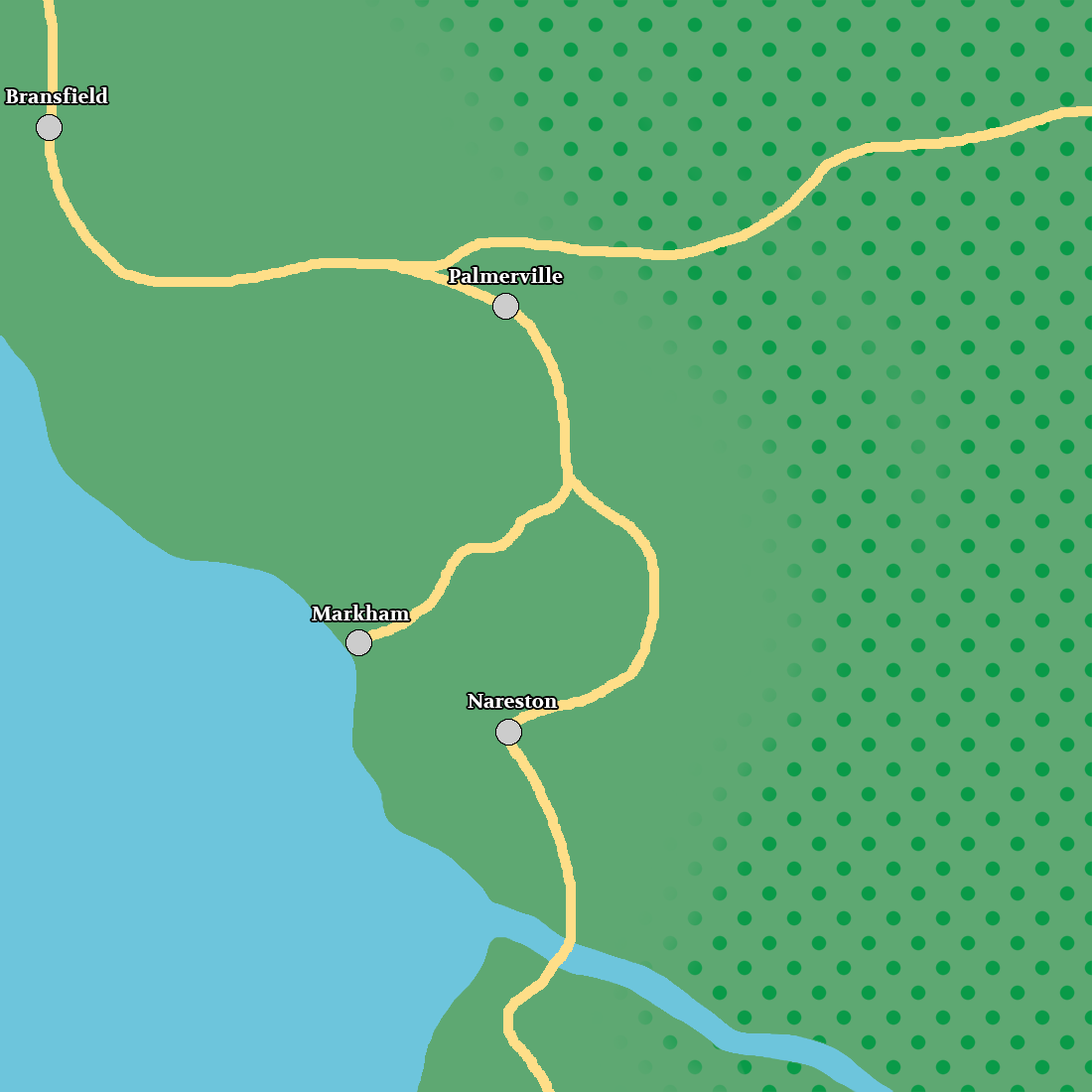
<style>
.page{position:relative;width:1092px;height:1092px;background:#5ea872}
.page>*{position:absolute;margin:0}
.t1{font:19.9px "Volkhov-Bold";color:#ffffff}
</style>
<div class="page">
<p class="t1" style="left:5px;top:87px;width:103px;height:16px">Bransfield</p>
<p class="t1" style="left:449px;top:267px;width:114px;height:16px">Palmerville</p>
<p class="t1" style="left:312px;top:605px;width:98px;height:15px">Markham</p>
<p class="t1" style="left:468px;top:694px;width:90px;height:14px">Nareston</p>
</div>
